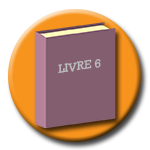
<style>
.page{position:relative;width:150px;height:150px;background:#ffffff}
.page>*{position:absolute;margin:0}
.t1{font:12px "Rockwell";color:#bebebe}
</style>
<div class="page">
<p class="t1" style="left:58px;top:59px;width:43px;height:15px;rotate:-9deg">LIVRE 6</p>
</div>
